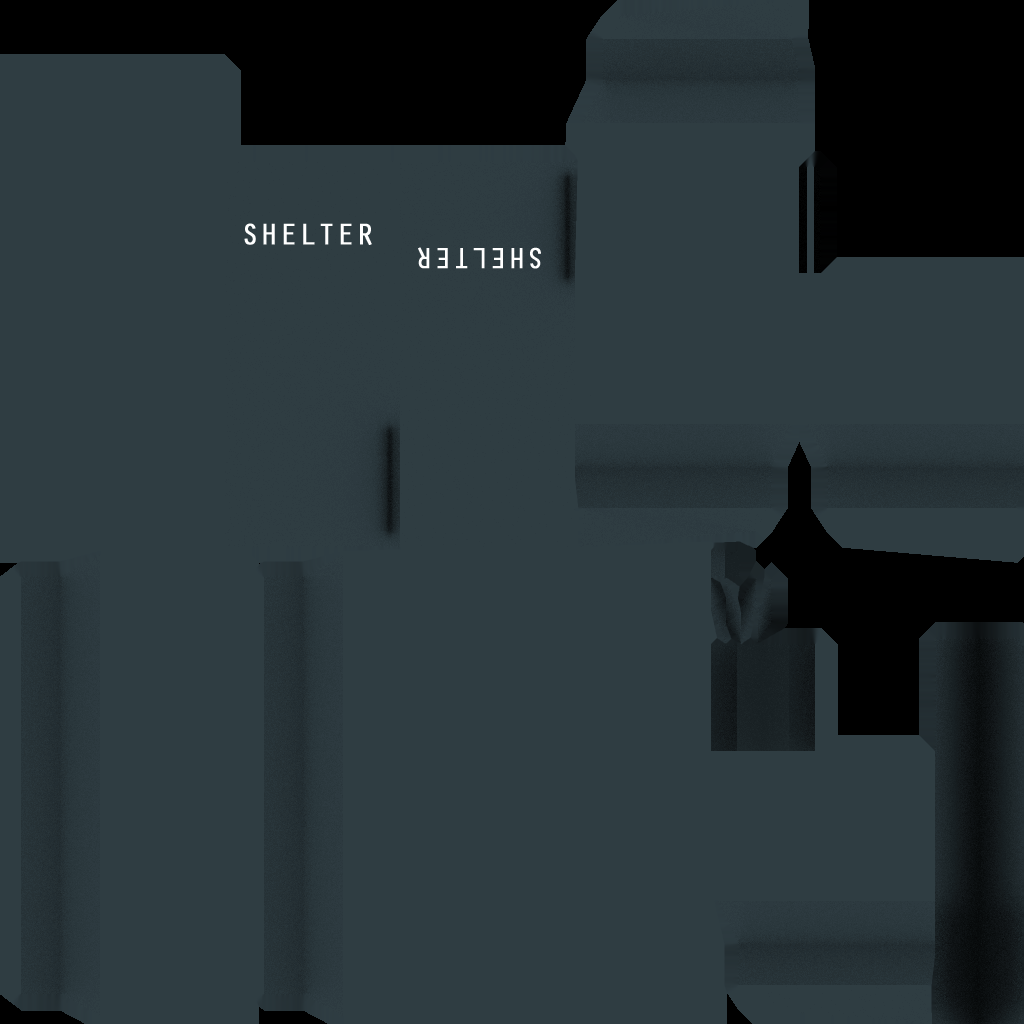
<style>
.page{position:relative;width:1024px;height:1024px;background:#2f3d42}
.page>*{position:absolute;margin:0}
.t1{font:30.5px "OratorStd";color:#ffffff;font-weight:bold}
.t2{font:29.5px "OratorStd";color:#ffffff;font-weight:bold}
</style>
<div class="page">
<p class="t1" style="left:244px;top:223px;width:128px;height:22px">SHELTER</p>
<p class="t2" style="left:418px;top:247px;width:123px;height:22px;rotate:180deg">SHELTER</p>
</div>
